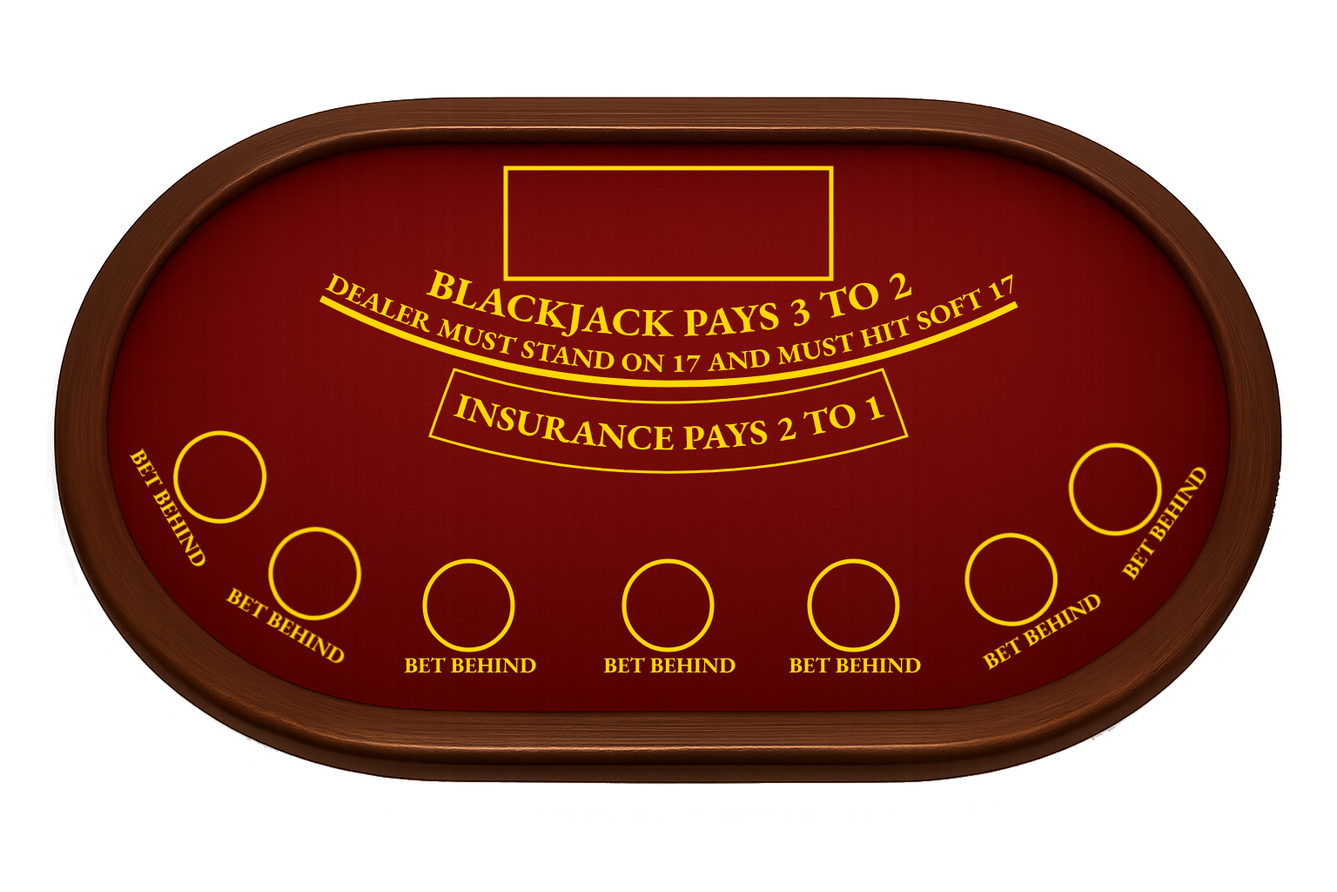
<style>
.page{position:relative;width:1337px;height:892px;background:#ffffff}
.page>*{position:absolute;margin:0}
.t1{font:39.2px "EBGaramond-Bold";color:#ffd700}
.t2{font:26.1px "EBGaramond-Bold";color:#ffd700}
.t3{font:34.8px "EBGaramond-Bold";color:#ffd700}
</style>
<div class="page">
<p class="t1" style="left:426px;top:269px;width:486px;height:68px">BLACKJACK PAYS 3 TO 2</p>
<p class="t2" style="left:325px;top:273px;width:689px;height:100px">DEALER MUST STAND ON 17 AND MUST HIT SOFT 17</p>
<p class="t3" style="left:453px;top:394px;width:433px;height:56px">INSURANCE PAYS 2 TO 1</p>
</div>
